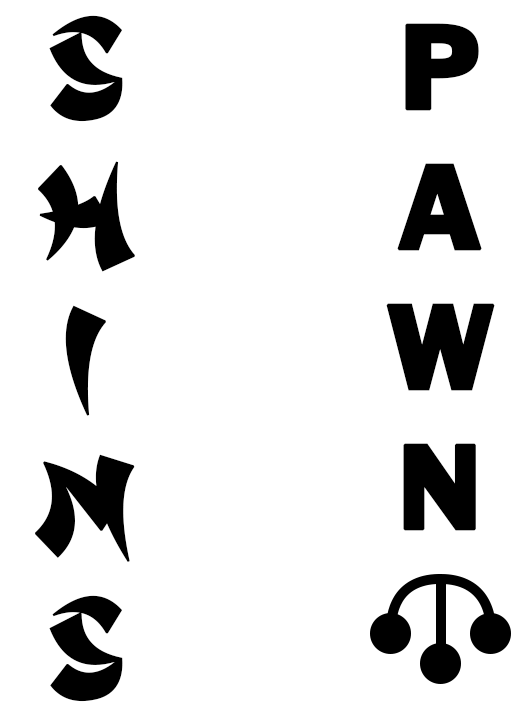
<style>
.page{position:relative;width:531px;height:721px;background:#ffffff}
.page>*{position:absolute;margin:0}
.t1{font:160px/145px "ChinatownChamps";letter-spacing:0.03em;color:#000000;font-weight:bold}
.t2{font:110px/140px "FranklinGothic-Regular";letter-spacing:0.5em;color:#000000;font-weight:bold}
</style>
<div class="page">
<p class="t1" style="left:35px;top:15px;width:100px;height:687px;text-align:center">S<br>H<br>I<br> N’<br>S</p>
<p class="t2" style="left:386px;top:23px;width:109px;height:508px;text-align:center">P<br>A<br>W<br>N</p>
</div>
